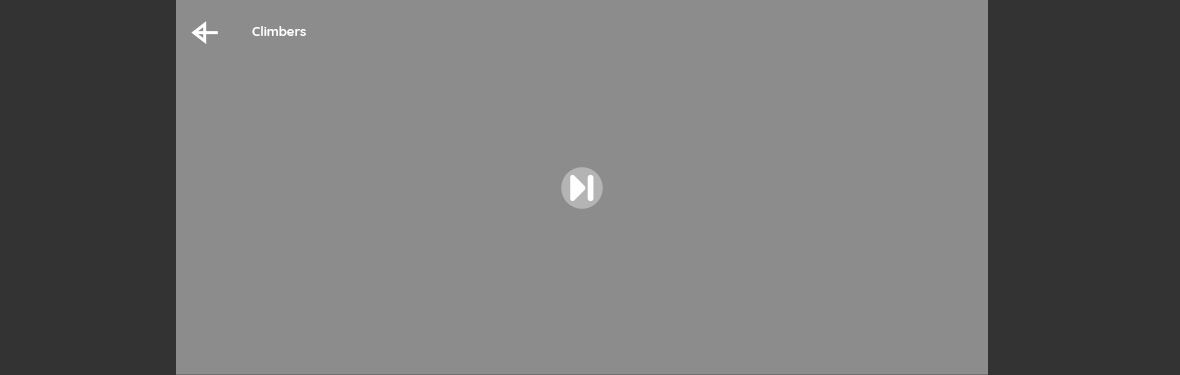
<style>
.page{position:relative;width:1180px;height:375px;background:#8c8c8c}
.page>*{position:absolute;margin:0}
.t1{font:13px "Quicksand-Bold";color:#ffffff}
</style>
<div class="page">
<p class="t1" style="left:252px;top:26px;width:54px;height:10px">Climbers</p>
</div>
